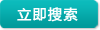
<style>
.page{position:relative;width:100px;height:30px}
.page>*{position:absolute;margin:0}
.t1{font:14px "MicrosoftYaHei";letter-spacing:0.075em;color:#ffffff;font-weight:bold}
</style>
<div class="page">
<p class="t1" style="left:17px;top:7px;width:61px;height:15px">立即搜索</p>
</div>
